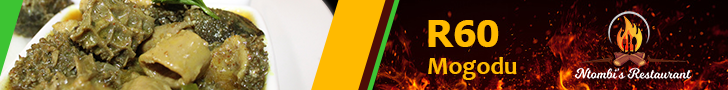
<style>
.page{position:relative;width:728px;height:90px}
.page>*{position:absolute;margin:0}
.t1{font:37px "Tahoma-Bold";color:#ffba00}
.t2{font:25px "Candara-Bold";color:#ffba00}
</style>
<div class="page">
<p class="t1" style="left:428px;top:20px;width:71px;height:27px">R60</p>
<p class="t2" style="left:428px;top:57px;width:89px;height:23px">Mogodu</p>
</div>
